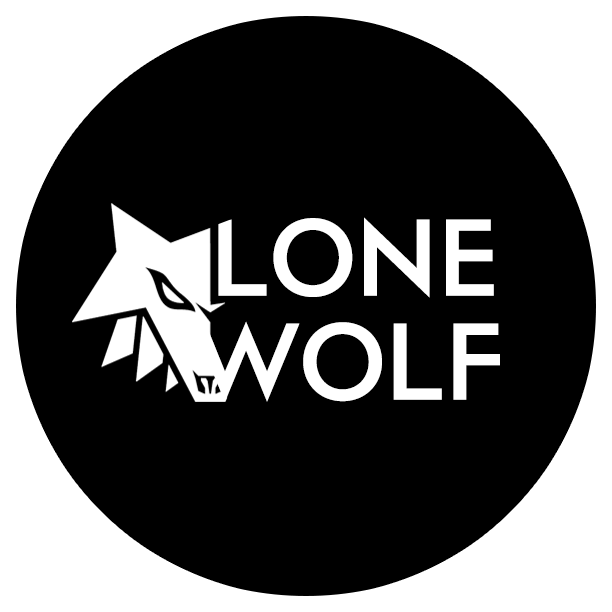
<style>
.page{position:relative;width:612px;height:612px;background:#000000}
.page>*{position:absolute;margin:0}
.t1{font:108.5px "FONTSPRINGDEMO-CosmataSemiBoldRegular";color:#ffffff}
</style>
<div class="page">
<p class="t1" style="left:218px;top:217px;width:276px;height:81px">LONE</p>
<p class="t1" style="left:192px;top:321px;width:308px;height:81px">WOLF</p>
</div>
